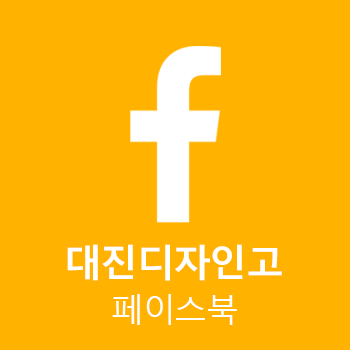
<style>
.page{position:relative;width:350px;height:350px;background:#ffb200}
.page>*{position:absolute;margin:0}
.t1{font:37.8px "MalgunGothicBold";letter-spacing:-0.05em;color:#ffffff}
.t2{font:33px "MalgunGothic";letter-spacing:-0.05em;color:#ffffff}
</style>
<div class="page">
<p class="t1" style="left:67px;top:244px;width:215px;height:37px">대진디자인고</p>
<p class="t2" style="left:112px;top:294px;width:125px;height:31px">페이스북</p>
</div>
